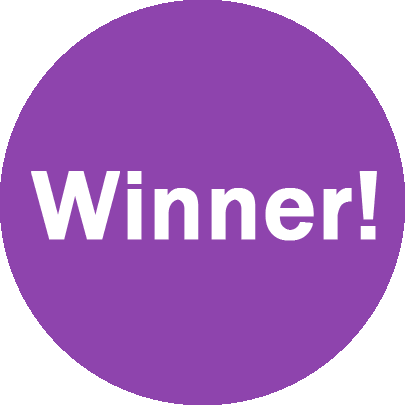
<style>
.page{position:relative;width:405px;height:405px;background:#8e44ad}
.page>*{position:absolute;margin:0}
.t1{font:100px "FranklinGothic-Medium";color:#ffffff;font-weight:bold}
</style>
<div class="page">
<p class="t1" style="left:31px;top:171px;width:346px;height:70px">Winner!</p>
</div>
